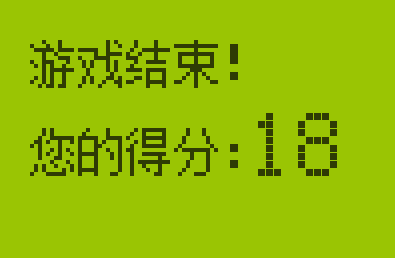
<style>
.page{position:relative;width:395px;height:258px;background:#9ac503}
.page>*{position:absolute;margin:0}
.t1{font:48px/88px "FZXS12--GB1-0";color:#2f3b04}
.t2{font:96px "FZXS12--GB1-0";color:#2f3b04}
</style>
<div class="page">
<p class="t1" style="left:30px;top:40px;width:208px;height:136px">游戏结束！<br>您的得分：</p>
<p class="t2" style="left:258px;top:113px;width:79px;height:63px">18</p>
</div>
